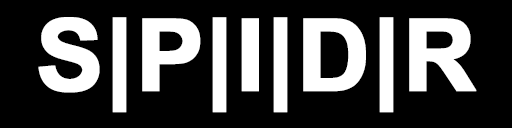
<style>
.page{position:relative;width:512px;height:128px;background:#000000}
.page>*{position:absolute;margin:0}
.t1{font:100px "Arial-BoldMT";color:#ffffff;font-weight:bold}
</style>
<div class="page">
<p class="t1" style="left:38px;top:17px;width:439px;height:96px">S|P|I|D|R</p>
</div>
